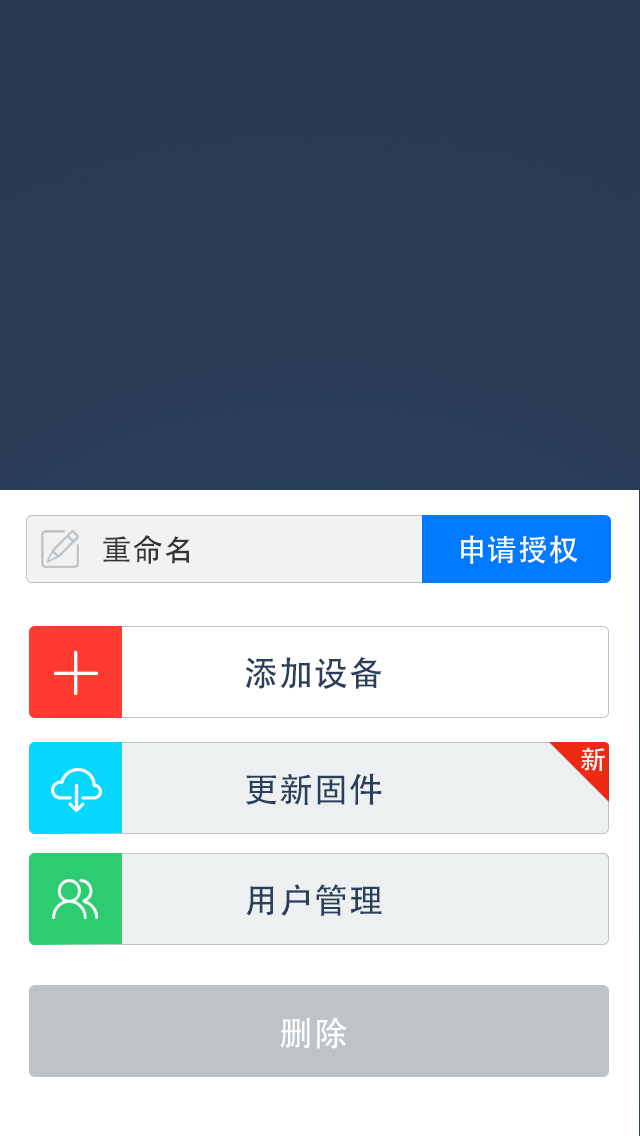
<style>
.page{position:relative;width:640px;height:1136px;background:#ffffff}
.page>*{position:absolute;margin:0}
.t1{font:30px "AdobeHeitiStd-Regular";letter-spacing:0.025em;color:#363434}
.t2{font:30px "AdobeHeitiStd-Regular";letter-spacing:0.025em;color:#ffffff}
.t3{font:34px "AdobeHeitiStd-Regular";letter-spacing:0.025em;color:#293f5c}
.t4{font:26px "AdobeHeitiStd-Regular";letter-spacing:0.025em;color:#ffffff}
.t5{font:34px "AdobeHeitiStd-Regular";letter-spacing:0.025em;color:#ffffff}
</style>
<div class="page">
<p class="t1" style="left:103px;top:535px;width:87px;height:29px">重命名</p>
<p class="t2" style="left:461px;top:535px;width:117px;height:29px">申请授权</p>
<p class="t3" style="left:245px;top:657px;width:137px;height:32px">添加设备</p>
<p class="t4" style="left:581px;top:747px;width:24px;height:24px">新</p>
<p class="t3" style="left:245px;top:773px;width:137px;height:32px">更新固件</p>
<p class="t3" style="left:246px;top:884px;width:136px;height:32px">用户管理</p>
<p class="t5" style="left:280px;top:1017px;width:67px;height:32px">删除</p>
</div>
